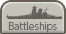
<style>
.page{position:relative;width:66px;height:34px;background:#c5c2b9}
.page>*{position:absolute;margin:0}
.t1{font:10px "UDShinGoPro-Light";color:#6a6560;scale:0.9 1}
</style>
<div class="page">
<p class="t1" style="left:8px;top:21px;width:49px;height:12px">Battleships</p>
</div>
